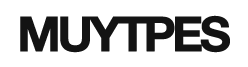
<style>
.page{position:relative;width:248px;height:67px;background:#ffffff}
.page>*{position:absolute;margin:0}
.t1{font:48px "HelveticaNeueLTStd-Bd";letter-spacing:-0.1em;color:#131313;font-weight:bold}
</style>
<div class="page">
<p class="t1" style="left:20px;top:15px;width:210px;height:38px">MUYTPES</p>
</div>
